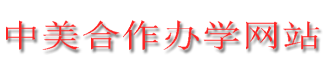
<style>
.page{position:relative;width:324px;height:75px;background:#ffffff}
.page>*{position:absolute;margin:0}
.t1{font:32px "Terminal";letter-spacing:0.005em;color:#ed2222}
</style>
<div class="page">
<p class="t1" style="left:6px;top:20px;width:314px;height:30px;opacity:0.86">中美合作办学网站</p>
</div>
